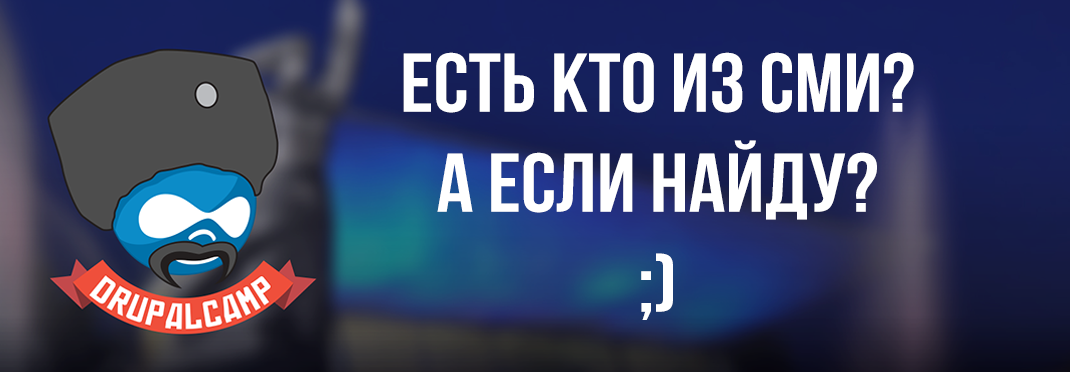
<style>
.page{position:relative;width:1070px;height:372px}
.page>*{position:absolute;margin:0}
.t1{font:83.3px "BebasNeueBold";color:#ffffff;scale:1.09 1}
</style>
<div class="page">
<p class="t1" style="left:403px;top:52px;width:511px;height:268px;text-align:center">есть кто из СМИ?<br>а если найду? <br>;)</p>
</div>
